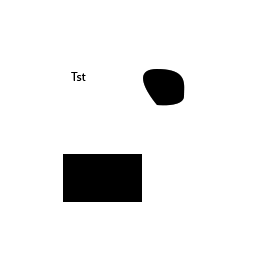
<style>
.page{position:relative;width:256px;height:256px;background:#ffffff}
.page>*{position:absolute;margin:0}
.t1{font:12px "MyriadPro-Regular";color:#000000}
</style>
<div class="page">
<p class="t1" style="left:71px;top:72px;width:15px;height:9px">Tst</p>
</div>
